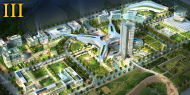
<style>
.page{position:relative;width:190px;height:95px}
.page>*{position:absolute;margin:0}
.t1{font:20px "BaskOldFace";color:#f3ca0d}
</style>
<div class="page">
<p class="t1" style="left:3px;top:3px;width:21px;height:14px">III</p>
</div>
